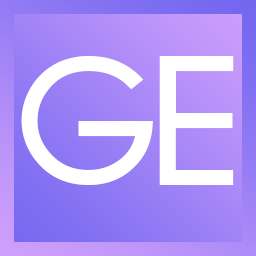
<style>
.page{position:relative;width:256px;height:256px}
.page>*{position:absolute;margin:0}
.t1{font:177.5px "CoolSansRegular";color:#ffffff}
</style>
<div class="page">
<p class="t1" style="left:21px;top:56px;width:213px;height:129px">GE</p>
</div>
